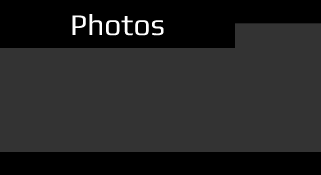
<style>
.page{position:relative;width:321px;height:175px;background:#333333}
.page>*{position:absolute;margin:0}
.t1{font:30px "Play";color:#ffffff}
</style>
<div class="page">
<p class="t1" style="left:72px;top:14px;width:92px;height:22px">Photos</p>
</div>
